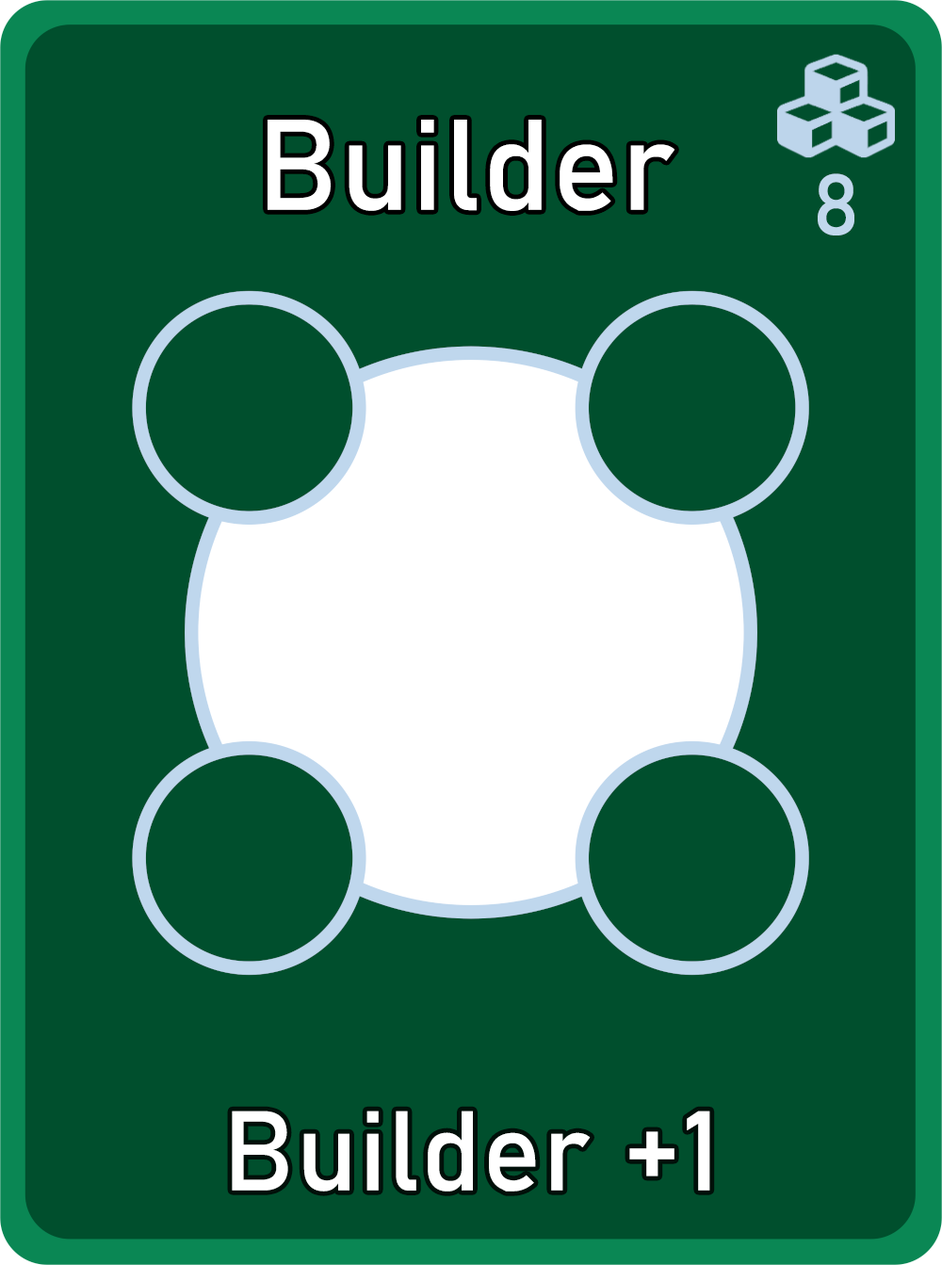
<style>
.page{position:relative;width:942px;height:1265px;background:#004f2d}
.page>*{position:absolute;margin:0}
.t1{font:126.7px "Bahnschrift";letter-spacing:0.01em;color:#ffffff}
.t2{font:85px "Bahnschrift";letter-spacing:0.01em;color:#c1d8ed}
.t3{font:111.3px "Bahnschrift";letter-spacing:0.01em;color:#ffffff}
</style>
<div class="page">
<p class="t1" style="left:268px;top:120px;width:407px;height:91px">Builder</p>
<p class="t2" style="left:818px;top:173px;width:37px;height:63px">8</p>
<p class="t3" style="left:232px;top:1111px;width:478px;height:81px">Builder +1</p>
</div>
